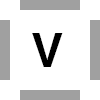
<style>
.page{position:relative;width:100px;height:100px;background:#ffffff}
.page>*{position:absolute;margin:0}
.t1{font:48px "Roboto-Bold";color:#000000}
</style>
<div class="page">
<p class="t1" style="left:32px;top:33px;width:31px;height:34px">V</p>
</div>
